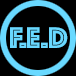
<style>
.page{position:relative;width:76px;height:76px;background:#000000}
.page>*{position:absolute;margin:0}
.t1{font:31px "Phosphate-Inline";letter-spacing:-0.02em;color:#69d8ff}
</style>
<div class="page">
<p class="t1" style="left:10px;top:27px;width:58px;height:21px">F.E.D</p>
</div>
